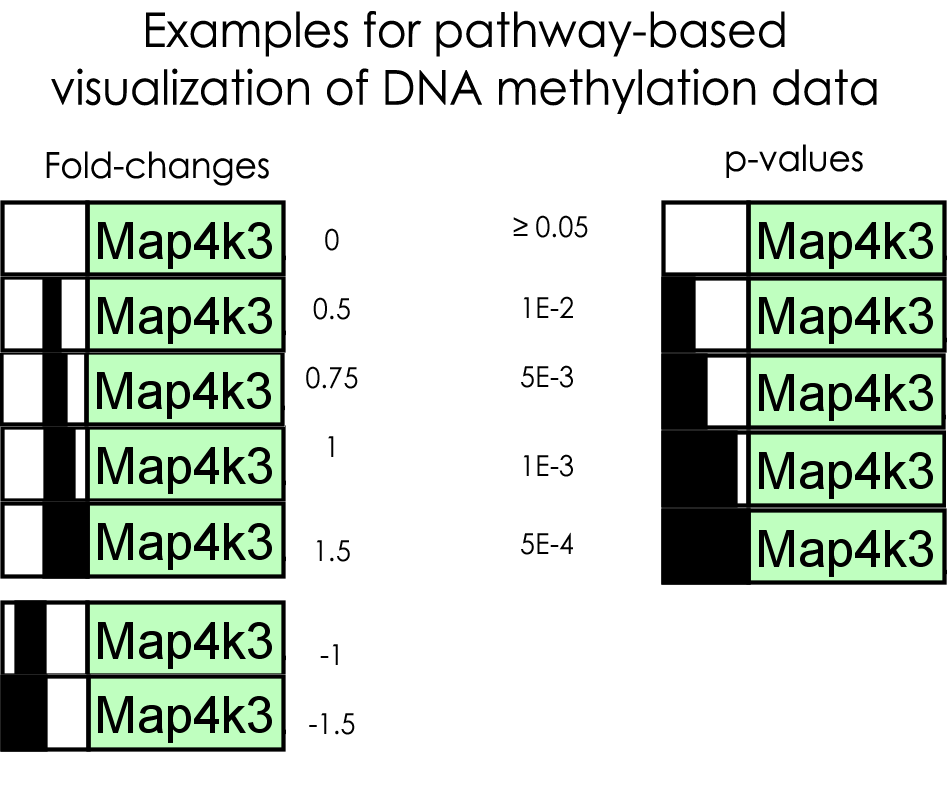
<style>
.page{position:relative;width:947px;height:800px;background:#ffffff}
.page>*{position:absolute;margin:0}
.t1{font:48px "CenturyGothic";color:#000000;scale:0.95 1}
.t2{font:36px "CenturyGothic";color:#000000;scale:0.95 1}
.t3{font:28.8px "CenturyGothic";color:#000000;scale:0.95 1}
</style>
<div class="page">
<p class="t1" style="left:51px;top:11px;width:826px;height:103px;text-align:center">Examples for pathway-based <br>visualization of DNA methylation data</p>
<p class="t2" style="left:726px;top:144px;width:137px;height:34px">p-values</p>
<p class="t2" style="left:46px;top:151px;width:223px;height:35px">Fold-changes</p>
<p class="t3" style="left:513px;top:215px;width:75px;height:340px;text-align:center">≥ 0.05<br><br><br>1E-2<br><br>5E-3<br><br><br>1E-3<br><br><br>5E-4</p>
<p class="t3" style="left:306px;top:228px;width:52px;height:507px;text-align:center">0<br><br>0.5<br><br>0.75<br><br>1<br><br><br>1.5<br><br><br>-1<br><br>-1.5</p>
</div>
